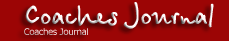
<style>
.page{position:relative;width:229px;height:41px;background:#9c0505}
.page>*{position:absolute;margin:0}
.t1{font:30px "BetinaScriptBold"}
.t2{font:9px "Tahoma"}
</style>
<div class="page">
<p class="t1" style="left:24px;top:2px;width:190px;height:33px">Coaches Journal<br><span class="t2">Coaches Journal</span></p>
</div>
